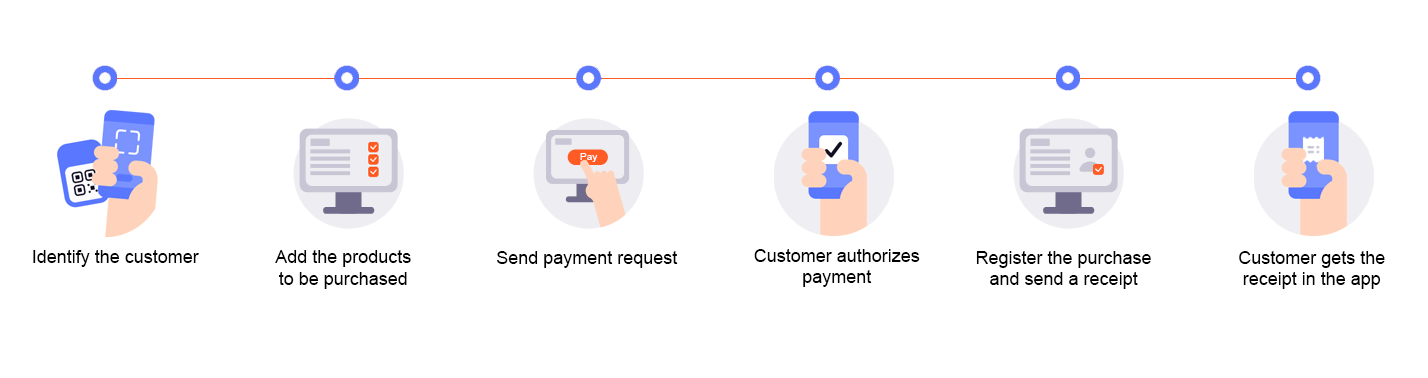
<style>
.page{position:relative;width:1428px;height:378px;background:#ffffff}
.page>*{position:absolute;margin:0}
.t1{font:18px "ArialMT";color:#000000}
</style>
<div class="page">
<p class="t1" style="left:33px;top:250px;width:166px;height:17px">Identify the customer</p>
<p class="t1" style="left:275px;top:250px;width:136px;height:39px;text-align:center">Add the products<br>to be purchased</p>
<p class="t1" style="left:497px;top:251px;width:181px;height:17px">Send payment request</p>
<p class="t1" style="left:754px;top:249px;width:166px;height:38px;text-align:center">Customer authorizes<br>payment</p>
<p class="t1" style="left:976px;top:251px;width:175px;height:38px;text-align:center">Register the purchase<br>and send a receipt</p>
<p class="t1" style="left:1239px;top:251px;width:146px;height:38px;text-align:center">Customer gets the<br>receipt in the app</p>
</div>
